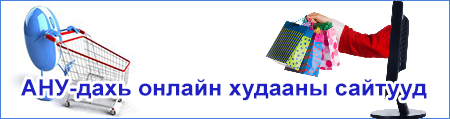
<style>
.page{position:relative;width:450px;height:119px;background:#ffffff}
.page>*{position:absolute;margin:0}
.t1{font:22.7px "Arial-BoldMT";color:#1e1fc4}
</style>
<div class="page">
<p class="t1" style="left:21px;top:79px;width:406px;height:22px">АНУ-дахь онлайн худааны сайтууд</p>
</div>
